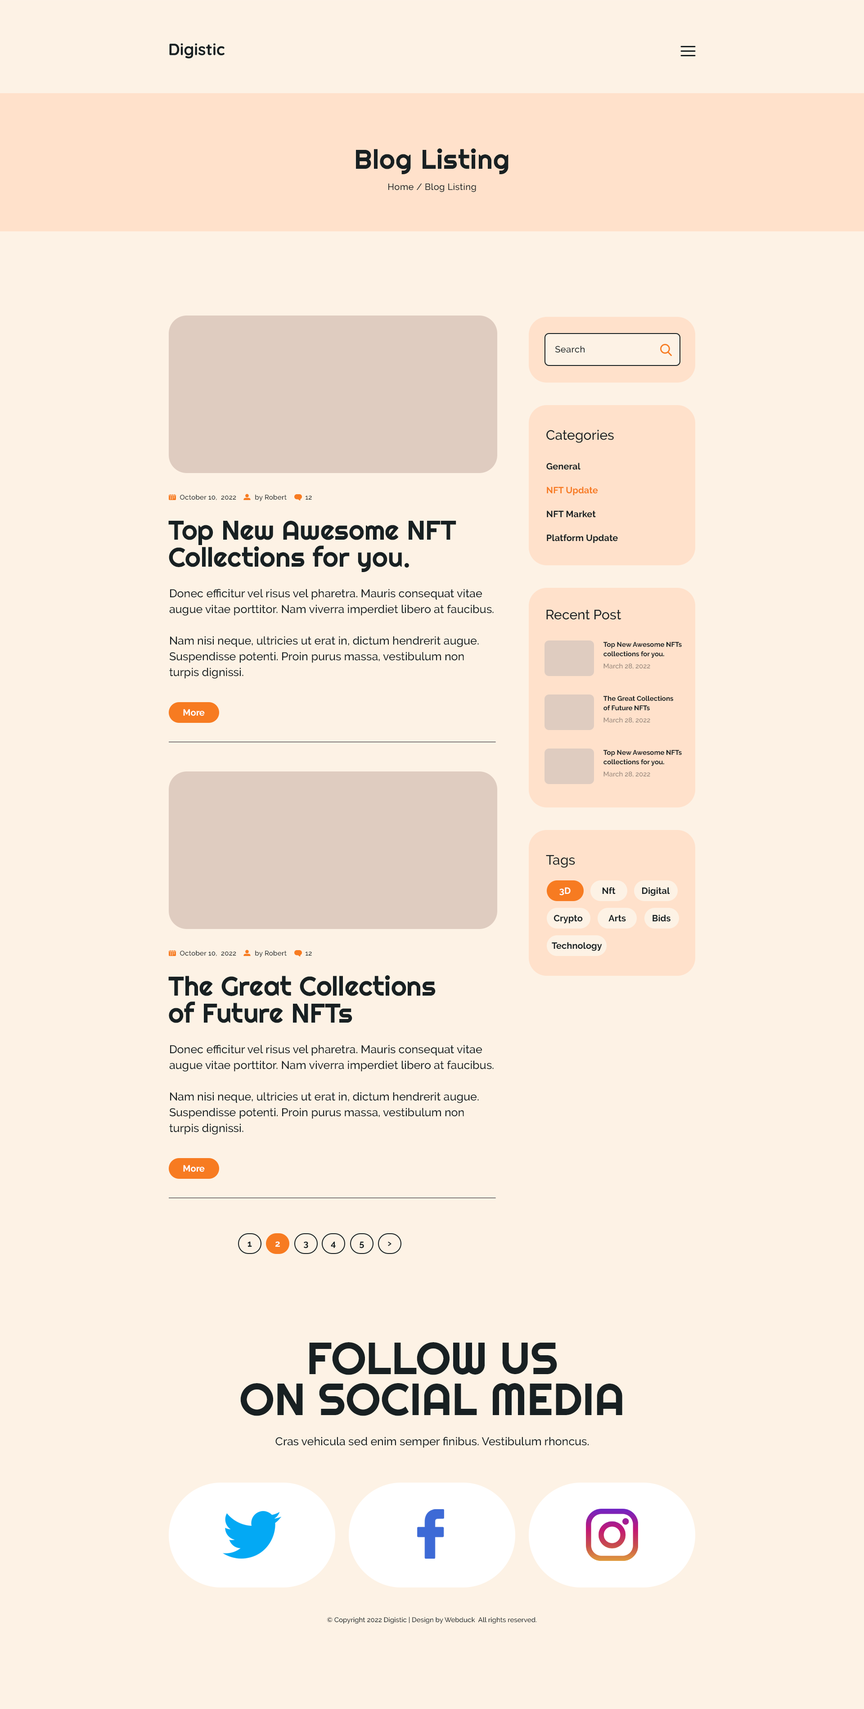
<style>
.page{position:relative;width:864px;height:1709px;background:#fdf2e5}
.page>*{position:absolute;margin:0}
.t1{font:27px "Righteous-Regular";letter-spacing:0.02em;color:#182022}
.t2{font:9px "Raleway-Medium";letter-spacing:0.02em;color:#182022}
.t3{font:13.5px "Raleway-Medium";color:#182022}
.t4{font:9px/23.9px "Raleway-Bold";color:#182022}
.t5{font:9px/23.9px "Raleway-Bold";color:#f77b21}
.t6{font:6.8px "Raleway-Medium";letter-spacing:0.02em;color:#182022}
.t7{font:27px/27px "Righteous-Regular";color:#182022}
.t8{font:11.2px/15.8px "Raleway-Medium";color:#182022}
.t9{font:6.8px/9.5px "Raleway-Bold";color:#182022}
.t10{font:6.8px "Raleway-Medium";color:#928378}
.t11{font:9px "Raleway-Bold";color:#fefefe}
.t12{font:9px "Raleway-Bold";color:#182022}
.t13{font:9px "Raleway-Bold";letter-spacing:0.02em;color:#182022}
.t14{font:9px "Raleway-Bold";letter-spacing:0.02em;color:#fefefe}
.t15{font:9px "PTSans-NarrowBold";letter-spacing:0.02em;color:#182022}
.t16{font:45px/41px "Righteous-Regular";color:#182022;text-transform:uppercase}
.t17{font:11.2px "Raleway-Medium";color:#182022}
.t18{font:6.8px "Raleway-Medium";color:#182022}
</style>
<div class="page">
<p class="t1" style="left:356px;top:148px;width:152px;height:26px">Blog Listing</p>
<p class="t2" style="left:388px;top:183px;width:88px;height:9px">Home / Blog Listing</p>
<p class="t2" style="left:555px;top:346px;width:30px;height:7px">Search</p>
<p class="t3" style="left:546px;top:430px;width:68px;height:13px">Categories</p>
<p class="t4" style="left:546px;top:463px;width:72px;height:80px">General<br><span class="t5">NFT Update<br></span>NFT Market<br>Platform Update</p>
<p class="t6" style="left:180px;top:495px;width:132px;height:6px">October 10,  2022          by Robert          12</p>
<p class="t7" style="left:168px;top:521px;width:288px;height:51px">Top New Awesome NFT Collections for you.</p>
<p class="t8" style="left:169px;top:589px;width:325px;height:90px">Donec efficitur vel risus vel pharetra. Mauris consequat vitae augue vitae porttitor. Nam viverra imperdiet libero at faucibus. <br><br>Nam nisi neque, ultricies ut erat in, dictum hendrerit augue. Suspendisse potenti. Proin purus massa, vestibulum non turpis dignissi.</p>
<p class="t3" style="left:546px;top:609px;width:75px;height:11px">Recent Post</p>
<p class="t9" style="left:603px;top:642px;width:79px;height:16px">Top New Awesome NFTs collections for you.</p>
<p class="t10" style="left:603px;top:663px;width:47px;height:6px">March 28, 2022</p>
<p class="t9" style="left:603px;top:696px;width:70px;height:15px">The Great Collections<br>of Future NFTs</p>
<p class="t11" style="left:183px;top:709px;width:22px;height:7px">More</p>
<p class="t10" style="left:603px;top:717px;width:47px;height:6px">March 28, 2022</p>
<p class="t9" style="left:603px;top:750px;width:79px;height:16px">Top New Awesome NFTs collections for you.</p>
<p class="t10" style="left:603px;top:771px;width:47px;height:6px">March 28, 2022</p>
<p class="t3" style="left:546px;top:855px;width:29px;height:13px">Tags</p>
<p class="t11" style="left:559px;top:887px;width:12px;height:8px">3D</p>
<p class="t12" style="left:603px;top:887px;width:13px;height:7px">Nft</p>
<p class="t12" style="left:642px;top:887px;width:28px;height:9px">Digital</p>
<p class="t12" style="left:554px;top:914px;width:29px;height:9px">Crypto</p>
<p class="t12" style="left:608px;top:914px;width:18px;height:8px">Arts</p>
<p class="t12" style="left:652px;top:914px;width:18px;height:8px">Bids</p>
<p class="t12" style="left:552px;top:942px;width:50px;height:9px">Technology</p>
<p class="t6" style="left:180px;top:950px;width:132px;height:7px">October 10,  2022          by Robert          12</p>
<p class="t7" style="left:168px;top:975px;width:268px;height:48px">The Great Collections<br>of Future NFTs</p>
<p class="t8" style="left:169px;top:1044px;width:325px;height:90px">Donec efficitur vel risus vel pharetra. Mauris consequat vitae augue vitae porttitor. Nam viverra imperdiet libero at faucibus. <br><br>Nam nisi neque, ultricies ut erat in, dictum hendrerit augue. Suspendisse potenti. Proin purus massa, vestibulum non turpis dignissi.</p>
<p class="t11" style="left:183px;top:1165px;width:22px;height:7px">More</p>
<p class="t13" style="left:248px;top:1241px;width:4px;height:5px">1</p>
<p class="t14" style="left:275px;top:1241px;width:5px;height:5px">2</p>
<p class="t13" style="left:303px;top:1241px;width:5px;height:7px">3</p>
<p class="t13" style="left:331px;top:1241px;width:5px;height:7px">4</p>
<p class="t13" style="left:359px;top:1241px;width:5px;height:7px">5</p>
<p class="t15" style="left:388px;top:1241px;width:4px;height:5px">&gt;</p>
<p class="t16" style="left:240px;top:1342px;width:382px;height:74px;text-align:center">FOLLOW US<br>ON SOCIAL MEDIA</p>
<p class="t17" style="left:275px;top:1436px;width:314px;height:12px">Cras vehicula sed enim semper finibus. Vestibulum rhoncus.</p>
<p class="t18" style="left:327px;top:1616px;width:210px;height:8px">© Copyright 2022 Digistic | Design by Webduck  All rights reserved.</p>
</div>
